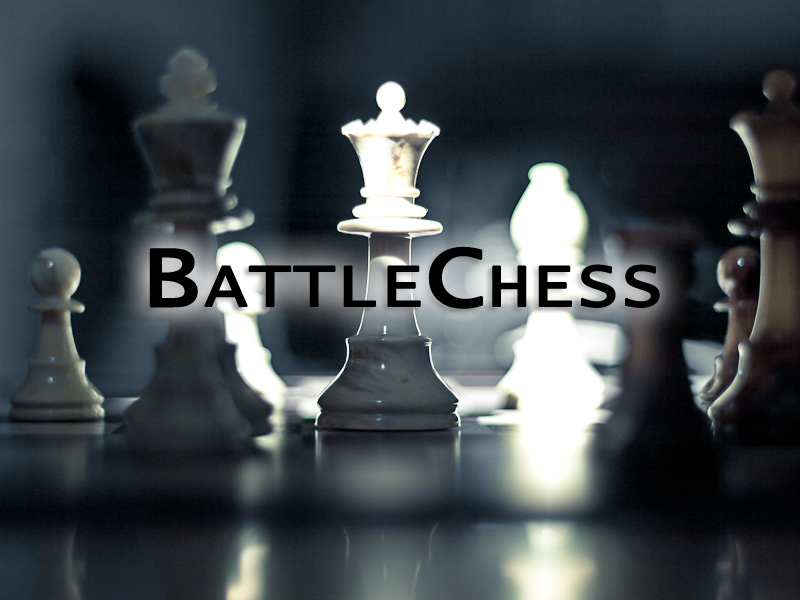
<style>
.page{position:relative;width:800px;height:600px}
.page>*{position:absolute;margin:0}
.t1{font:90px "LucidaConsole";color:#000000;font-variant:small-caps;font-weight:bold;scale:1.11 1}
</style>
<div class="page">
<p class="t1" style="left:149px;top:246px;width:511px;height:63px">BattleChess</p>
</div>
